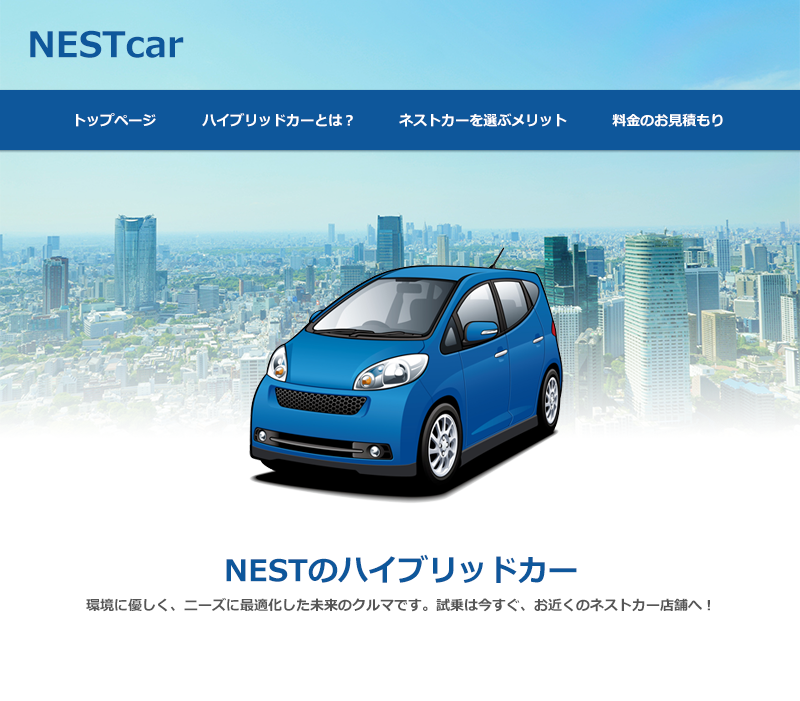
<style>
.page{position:relative;width:800px;height:701px;background:#ffffff}
.page>*{position:absolute;margin:0}
.t1{font:35.1px "Meiryo-Bold";color:#0e579b}
.t2{font:14px "Meiryo-Bold";color:#ffffff}
.t3{font:14px/29px "Meiryo-Bold";color:#565656}
.t4{font:30px/29px "Meiryo-Bold";color:#0e579b}
</style>
<div class="page">
<p class="t1" style="left:30px;top:30px;width:154px;height:28px">NESTcar</p>
<p class="t2" style="left:76px;top:113px;width:80px;height:14px">トップページ</p>
<p class="t2" style="left:202px;top:113px;width:151px;height:14px">ハイブリッドカーとは？</p>
<p class="t2" style="left:399px;top:113px;width:168px;height:14px">ネストカーを選ぶメリット</p>
<p class="t2" style="left:612px;top:113px;width:111px;height:14px">料金のお見積もり</p>
<p class="t3" style="left:86px;top:554px;width:624px;height:58px;text-align:center"><span class="t4">NESTのハイブリッドカー<br></span>環境に優しく、ニーズに最適化した未来のクルマです。試乗は今すぐ、お近くのネストカー店舗へ！</p>
</div>
